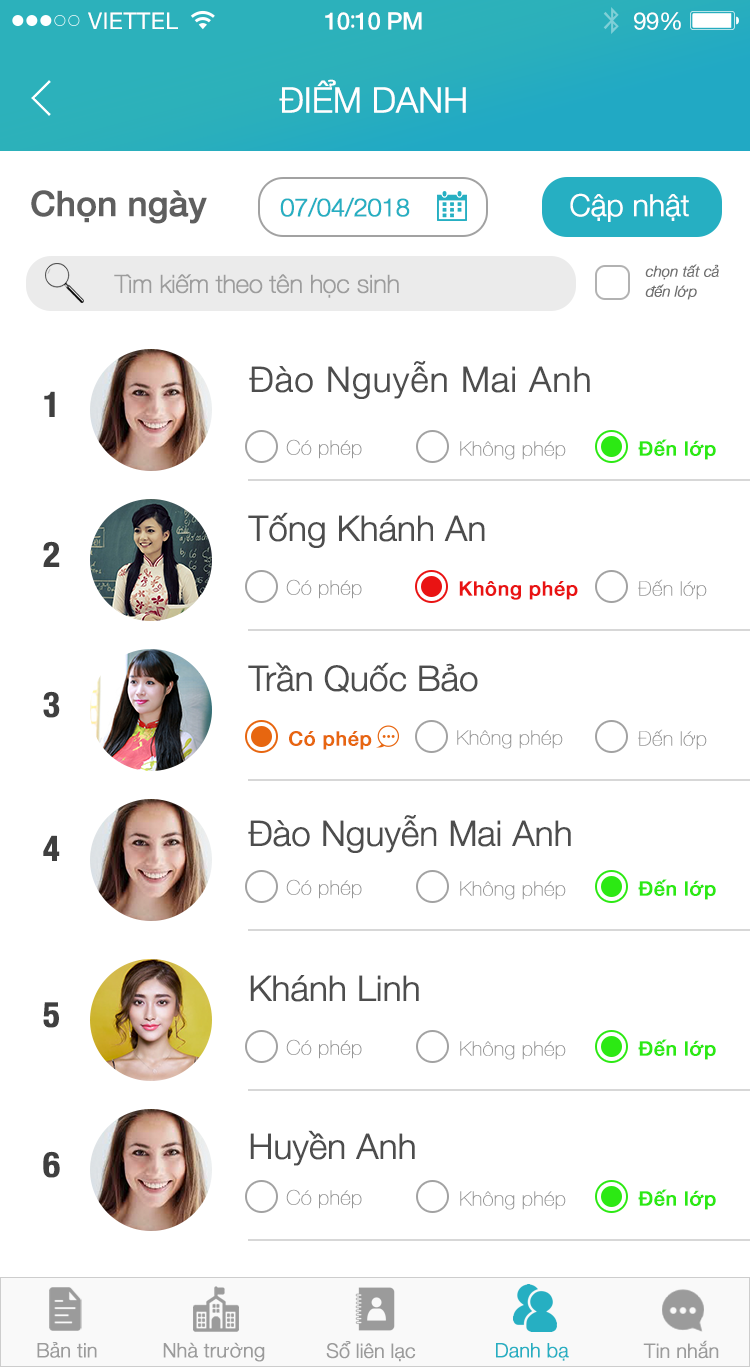
<style>
.page{position:relative;width:750px;height:1367px;background:#ffffff}
.page>*{position:absolute;margin:0}
.t1{font:23px "HelveticaNeue";letter-spacing:0.02em;color:#ffffff}
.t2{font:24px "HelveticaNeue-Medium";letter-spacing:-0.02em;color:#ffffff}
.t3{font:26px "MyriadPro-Regular";letter-spacing:-0.02em;color:#ffffff}
.t4{font:24px "HelveticaNeue";letter-spacing:-0.02em;color:#ffffff}
.t5{font:35px "HelveticaNeue-Light";letter-spacing:-0.02em;color:#ffffff;font-weight:bold}
.t6{font:35px "HelveticaNeue-Medium";letter-spacing:-0.02em;color:#5f5f5f;font-weight:bold}
.t7{font:25px "HelveticaNeue-Light";letter-spacing:-0.02em;color:#26afc2;font-weight:bold}
.t8{font:30px "HelveticaNeue-Light";letter-spacing:-0.02em;color:#ffffff;font-weight:bold}
.t9{font:15px/20px "HelveticaNeue-LightItalic";letter-spacing:-0.02em;color:#707070;font-weight:bold}
.t10{font:25px "HelveticaNeue-Thin";letter-spacing:-0.02em;color:#9c9c9c;font-weight:bold}
.t11{font:35px "HelveticaNeue-Light";letter-spacing:0.01em;color:#4d4d4d;font-weight:bold}
.t12{font:35px "HelveticaNeue-CondensedBold";letter-spacing:0.01em;color:#3f3f3f;font-weight:bold}
.t13{font:20px "HelveticaNeue-UltraLight";letter-spacing:0.01em;color:#959595;font-weight:bold}
.t14{font:20px "HelveticaNeue-Medium";letter-spacing:0.01em;color:#2ce913;font-weight:bold}
.t15{font:35px "HelveticaNeue-Light";letter-spacing:-0.02em;color:#4d4d4d;font-weight:bold}
.t16{font:20px "HelveticaNeue-Medium";letter-spacing:0.01em;color:#e91313;font-weight:bold}
.t17{font:20px "HelveticaNeue-Medium";letter-spacing:0.01em;color:#e76610;font-weight:bold}
.t18{font:20px "HelveticaNeue-Light";letter-spacing:-0.02em;color:#9b9b9b;font-weight:bold}
.t19{font:20px "HelveticaNeue-Light";letter-spacing:-0.02em;color:#26afc2;font-weight:bold}
</style>
<div class="page">
<p class="t1" style="left:88px;top:12px;width:90px;height:17px">VIETTEL</p>
<p class="t2" style="left:325px;top:12px;width:97px;height:18px">10<span class="t3">:</span>10 PM</p>
<p class="t4" style="left:634px;top:12px;width:47px;height:18px">99%</p>
<p class="t5" style="left:279px;top:79px;width:187px;height:34px">ĐIỂM DANH</p>
<p class="t6" style="left:31px;top:190px;width:176px;height:34px">Chọn ngày</p>
<p class="t7" style="left:280px;top:197px;width:130px;height:20px">07/04/2018</p>
<p class="t8" style="left:570px;top:193px;width:119px;height:29px">Cập nhật</p>
<p class="t9" style="left:645px;top:264px;width:74px;height:36px">chọn tất cả<br>đến lớp</p>
<p class="t10" style="left:114px;top:274px;width:285px;height:24px">Tìm kiếm theo tên học sinh</p>
<p class="t11" style="left:249px;top:360px;width:341px;height:39px">Đào Nguyễn Mai Anh</p>
<p class="t12" style="left:44px;top:391px;width:11px;height:26px">1</p>
<p class="t13" style="left:286px;top:439px;width:76px;height:20px">Có phép</p>
<p class="t13" style="left:460px;top:441px;width:106px;height:19px">Không phép</p>
<p class="t14" style="left:638px;top:439px;width:78px;height:21px">Đến lớp</p>
<p class="t15" style="left:248px;top:512px;width:237px;height:36px">Tống Khánh An</p>
<p class="t12" style="left:43px;top:541px;width:17px;height:26px">2</p>
<p class="t13" style="left:286px;top:579px;width:76px;height:20px">Có phép</p>
<p class="t16" style="left:459px;top:581px;width:119px;height:19px">Không phép</p>
<p class="t13" style="left:638px;top:579px;width:69px;height:21px">Đến lớp</p>
<p class="t15" style="left:248px;top:662px;width:230px;height:31px">Trần Quốc Bảo</p>
<p class="t12" style="left:43px;top:691px;width:17px;height:27px">3</p>
<p class="t17" style="left:289px;top:731px;width:83px;height:19px">Có phép</p>
<p class="t13" style="left:457px;top:730px;width:106px;height:19px">Không phép</p>
<p class="t13" style="left:638px;top:729px;width:69px;height:21px">Đến lớp</p>
<p class="t15" style="left:248px;top:814px;width:323px;height:39px">Đào Nguyễn Mai Anh</p>
<p class="t12" style="left:43px;top:835px;width:17px;height:26px">4</p>
<p class="t13" style="left:286px;top:879px;width:76px;height:20px">Có phép</p>
<p class="t13" style="left:460px;top:881px;width:106px;height:19px">Không phép</p>
<p class="t14" style="left:638px;top:879px;width:78px;height:21px">Đến lớp</p>
<p class="t15" style="left:250px;top:975px;width:169px;height:27px">Khánh Linh</p>
<p class="t12" style="left:43px;top:1002px;width:16px;height:26px">5</p>
<p class="t13" style="left:286px;top:1039px;width:76px;height:20px">Có phép</p>
<p class="t13" style="left:460px;top:1041px;width:106px;height:19px">Không phép</p>
<p class="t14" style="left:638px;top:1039px;width:78px;height:21px">Đến lớp</p>
<p class="t15" style="left:250px;top:1130px;width:165px;height:36px">Huyền Anh</p>
<p class="t12" style="left:43px;top:1151px;width:17px;height:27px">6</p>
<p class="t13" style="left:286px;top:1189px;width:76px;height:20px">Có phép</p>
<p class="t13" style="left:460px;top:1191px;width:106px;height:19px">Không phép</p>
<p class="t14" style="left:638px;top:1189px;width:78px;height:21px">Đến lớp</p>
<p class="t18" style="left:37px;top:1342px;width:60px;height:16px">Bản tin</p>
<p class="t18" style="left:163px;top:1342px;width:102px;height:20px">Nhà trường</p>
<p class="t18" style="left:326px;top:1341px;width:90px;height:21px">Sổ liên lạc</p>
<p class="t19" style="left:496px;top:1343px;width:73px;height:18px">Danh bạ</p>
<p class="t18" style="left:643px;top:1340px;width:76px;height:19px">Tin nhắn</p>
</div>
